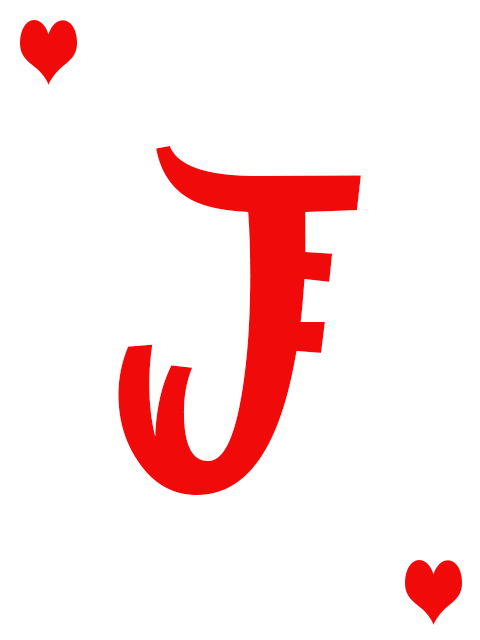
<style>
.page{position:relative;width:480px;height:640px;background:#ffffff}
.page>*{position:absolute;margin:0}
.t1{font:386.3px "Jokerman-Regular";color:#f10a0a}
</style>
<div class="page">
<p class="t1" style="left:118px;top:146px;width:243px;height:349px">J</p>
</div>
